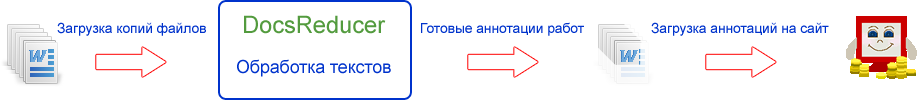
<style>
.page{position:relative;width:917px;height:100px;background:#ffffff}
.page>*{position:absolute;margin:0}
.t1{font:24px "ArialMT";letter-spacing:-0.01em;color:#539b3e}
.t2{font:14px "ArialMT";letter-spacing:-0.01em;color:#0033cc}
.t3{font:18px "ArialMT";letter-spacing:-0.01em;color:#0033cc}
</style>
<div class="page">
<p class="t1" style="left:244px;top:15px;width:142px;height:19px">DocsReducer</p>
<p class="t2" style="left:57px;top:22px;width:149px;height:14px">Загрузка копий файлов</p>
<p class="t2" style="left:421px;top:22px;width:163px;height:14px">Готовые аннотации работ</p>
<p class="t2" style="left:651px;top:22px;width:178px;height:14px">Загрузка аннотаций на сайт</p>
<p class="t3" style="left:237px;top:59px;width:154px;height:18px">Обработка текстов</p>
</div>
